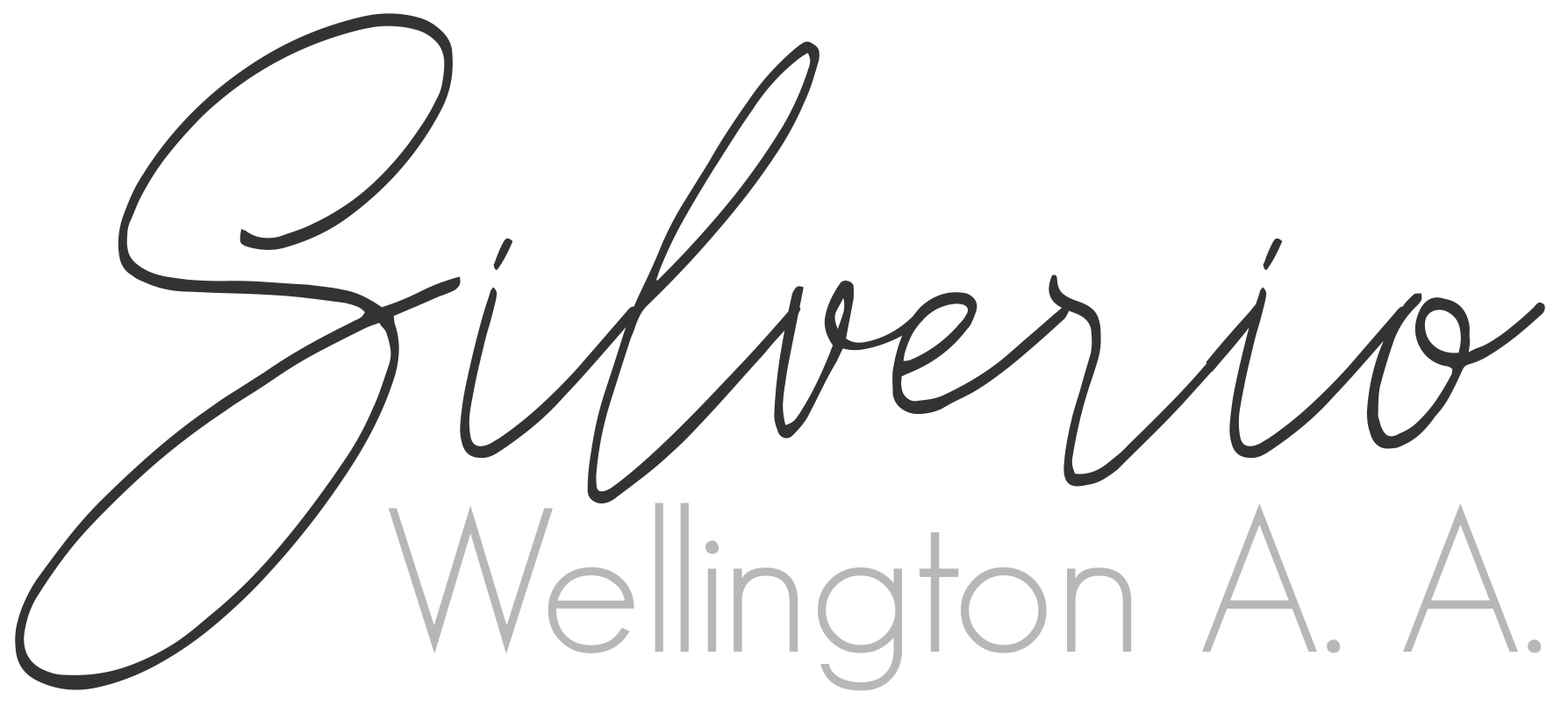
<style>
.page{position:relative;width:1568px;height:706px;background:#ffffff}
.page>*{position:absolute;margin:0}
.t1{font:624px "Reman";color:#333333}
.t2{font:200.7px "GeosansLight";color:#b7b7b7}
</style>
<div class="page">
<p class="t1" style="left:15px;top:13px;width:1530px;height:678px">Silverio</p>
<p class="t2" style="left:388px;top:503px;width:1154px;height:188px">Wellington A. A.</p>
</div>
